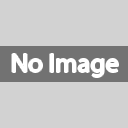
<style>
.page{position:relative;width:128px;height:128px;background:#d2d2d2}
.page>*{position:absolute;margin:0}
.t1{font:26.8px "MyriadHebrew-Regular";color:#ffffff}
</style>
<div class="page">
<p class="t1" style="left:12px;top:54px;width:106px;height:23px">No Image</p>
</div>
